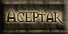
<style>
.page{position:relative;width:68px;height:34px}
.page>*{position:absolute;margin:0}
.t1{font:16px "Morpheus"}
</style>
<div class="page">
<p class="t1" style="left:5px;top:10px;width:60px;height:14px">Aceptar</p>
</div>
